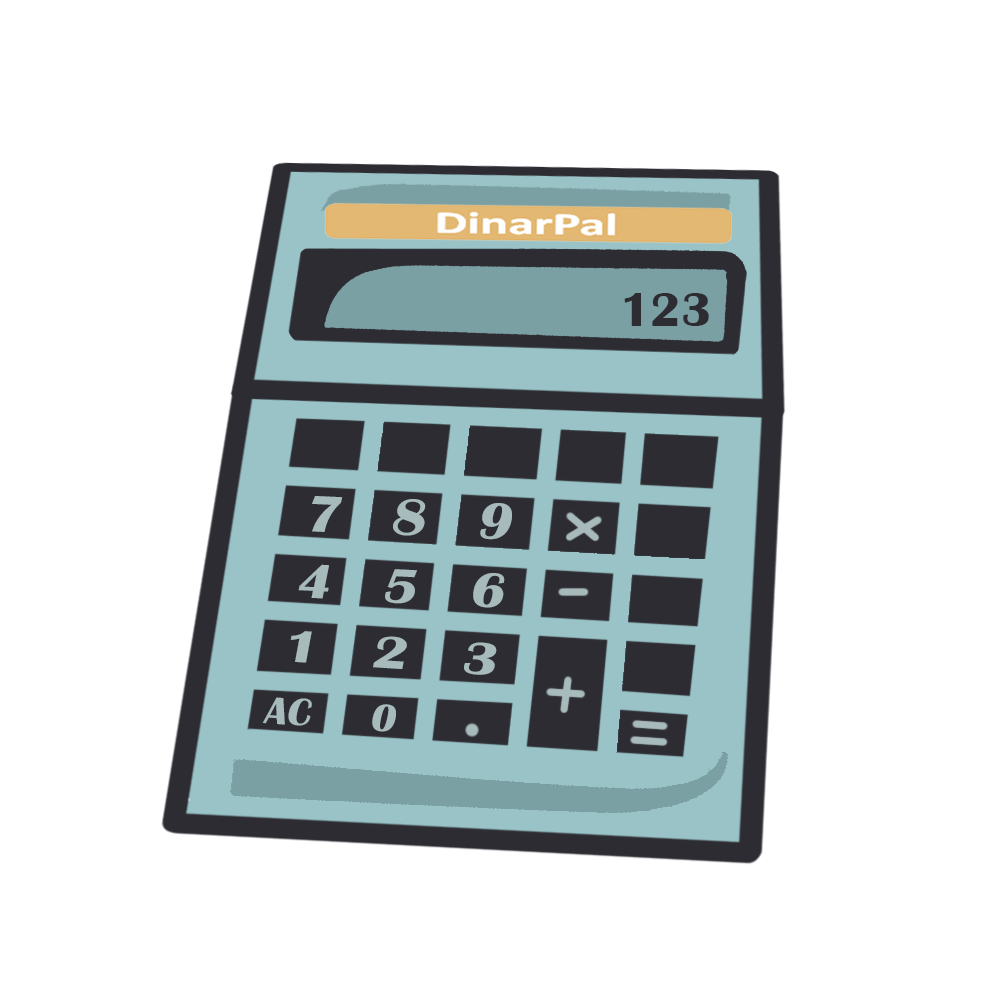
<style>
.page{position:relative;width:984px;height:984px;background:#ffffff}
.page>*{position:absolute;margin:0}
.t1{font:50px "BritannicBold";color:#2d2c33}
.t2{font:54px "BritannicBold";color:#a7babc;scale:1.06 1}
.t3{font:50.9px "BritannicBold";color:#a7babc;scale:1.12 1}
.t4{font:47.2px "BritannicBold";color:#a7babc;scale:1.26 1}
.t5{font:40px "BritannicBold";color:#a7babc}
</style>
<div class="page">
<p class="t1" style="left:624px;top:293px;width:85px;height:33px">123</p>
<p class="t2" style="left:312px;top:496px;width:200px;height:44px;rotate:3deg">7   8   9</p>
<p class="t3" style="left:298px;top:564px;width:207px;height:44px;rotate:3deg">4   5   6</p>
<p class="t4" style="left:290px;top:631px;width:207px;height:44px;rotate:4deg">1   2   3</p>
<p class="t5" style="left:262px;top:697px;width:134px;height:35px;rotate:4deg">AC     0</p>
</div>
